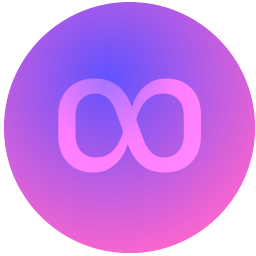
<style>
.page{position:relative;width:256px;height:256px;background:#ffffff}
.page>*{position:absolute;margin:0}
.t1{font:272.2px "JetBrainsMono-Light"}
</style>
<div class="page">
<p class="t1" style="left:58px;top:78px;width:143px;height:95px">∞</p>
</div>
